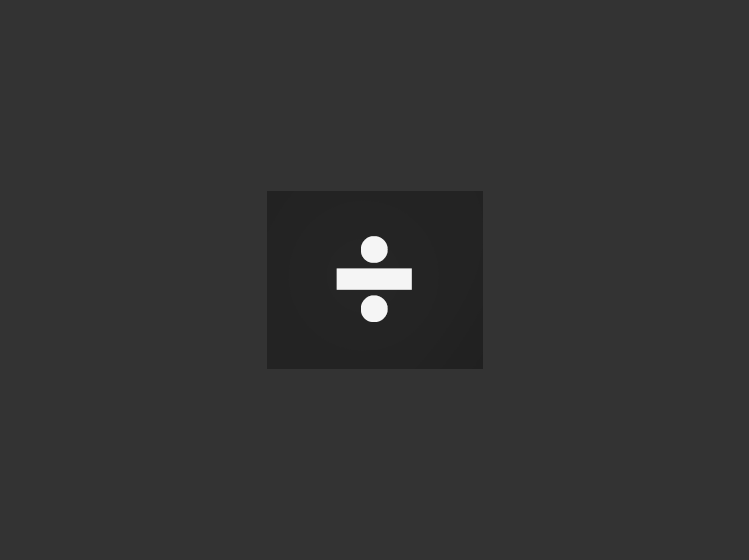
<style>
.page{position:relative;width:749px;height:560px;background:#333333}
.page>*{position:absolute;margin:0}
.t1{font:150px "Bauhaus93";color:#f5f5f5;font-variant:small-caps}
</style>
<div class="page">
<p class="t1" style="left:336px;top:236px;width:76px;height:86px">÷</p>
</div>
